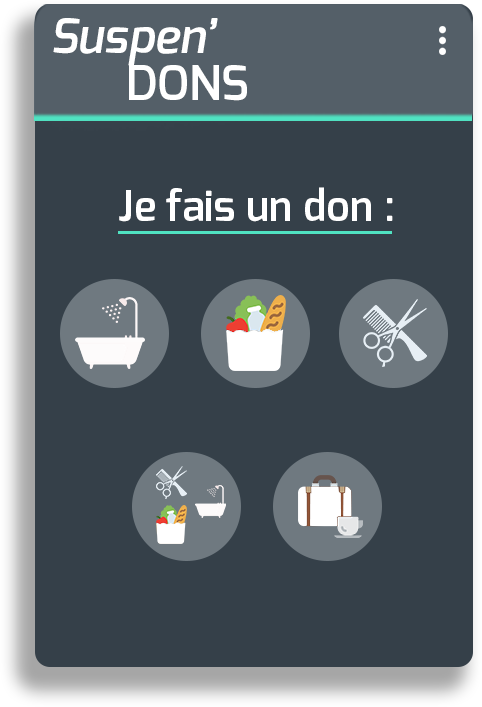
<style>
.page{position:relative;width:482px;height:707px;background:#354049}
.page>*{position:absolute;margin:0}
.t1{font:47.6px "Exo-DemiBoldItalic";color:#ffffff}
.t2{font:47.6px "Exo-DemiBold";color:#ffffff}
.t3{font:42.3px "Exo-DemiBold";color:#ffffff}
</style>
<div class="page">
<p class="t1" style="left:53px;top:18px;width:165px;height:48px">Suspen’</p>
<p class="t2" style="left:129px;top:65px;width:118px;height:36px">DONS</p>
<p class="t3" style="left:119px;top:187px;width:274px;height:35px">Je fais un don :</p>
</div>
